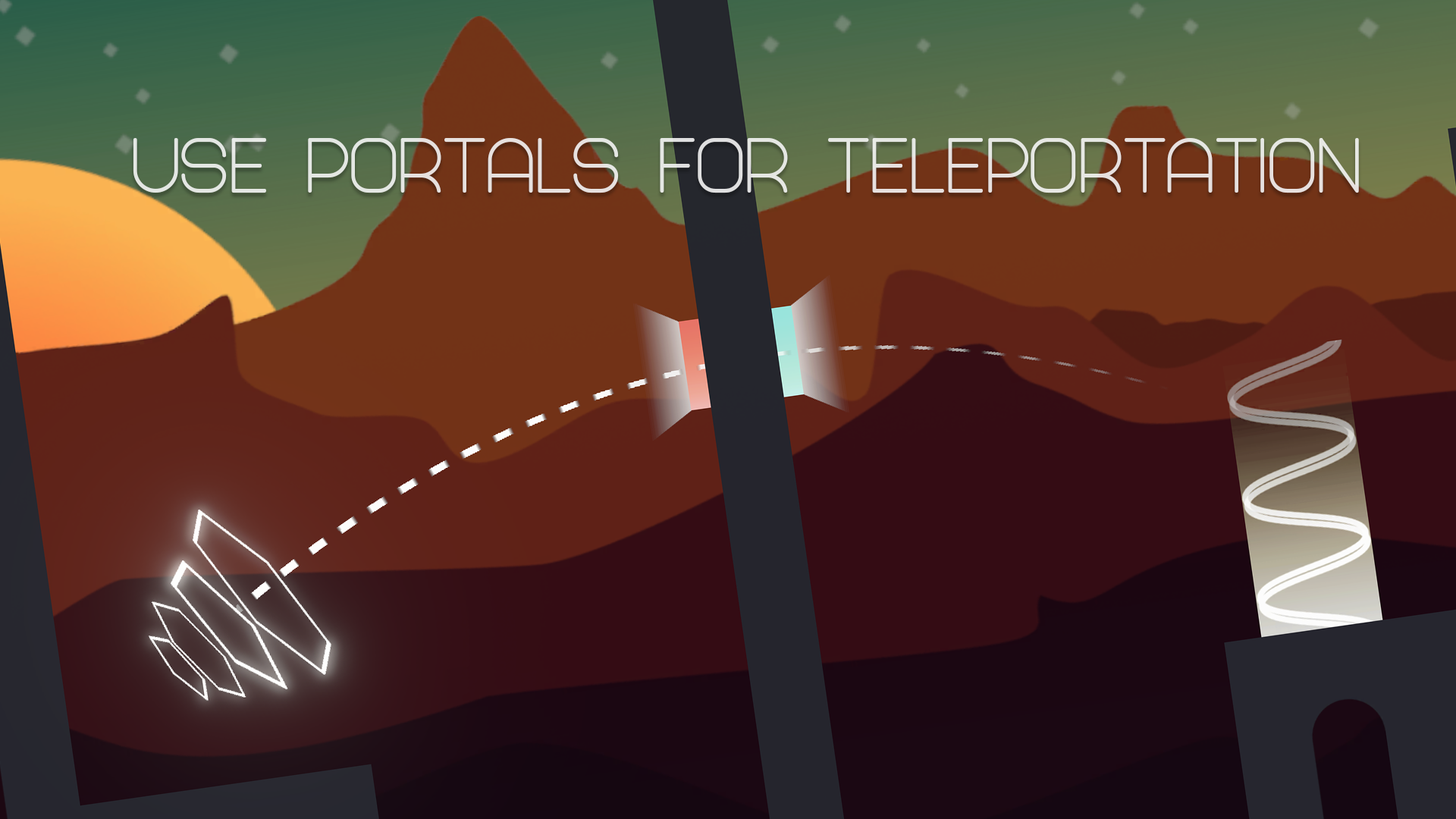
<style>
.page{position:relative;width:1456px;height:819px}
.page>*{position:absolute;margin:0}
.t1{font:80.3px "Abandoned-Bold";color:#e6e6e3}
</style>
<div class="page">
<p class="t1" style="left:133px;top:138px;width:1226px;height:55px">Use portals for teleportation</p>
</div>
